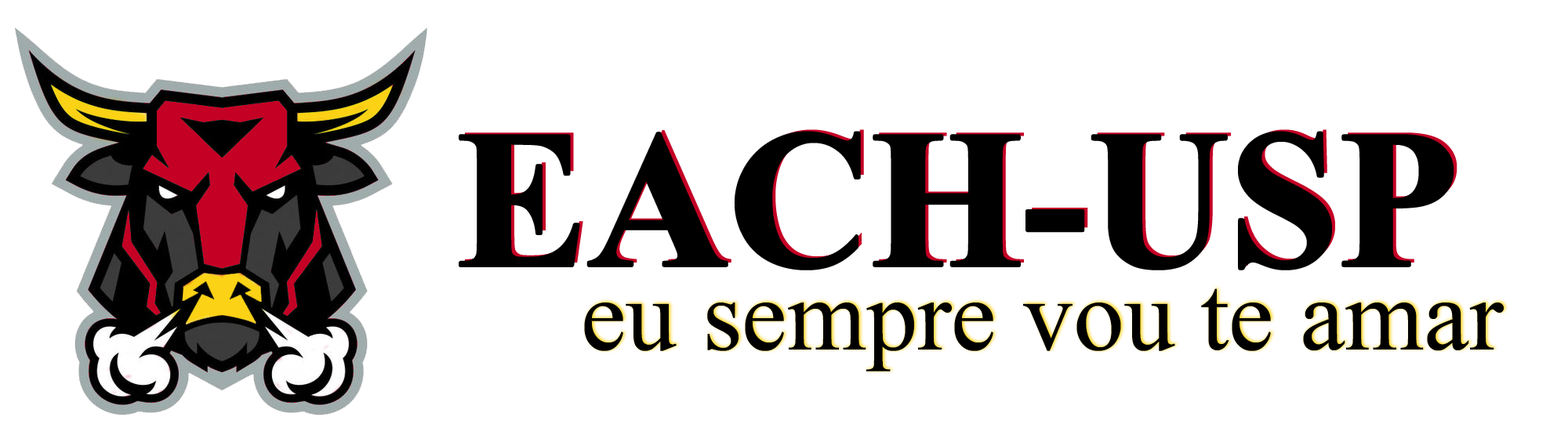
<style>
.page{position:relative;width:1568px;height:442px;background:#ffffff}
.page>*{position:absolute;margin:0}
.t1{font:196px "TimesNewRomanPS-BoldMT";color:#000000}
.t2{font:101.9px "TimesNewRomanPSMT";color:#000000}
</style>
<div class="page">
<p class="t1" style="left:460px;top:132px;width:993px;height:137px">EACH-USP</p>
<p class="t2" style="left:584px;top:289px;width:920px;height:83px">eu sempre vou te amar</p>
</div>
